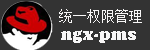
<style>
.page{position:relative;width:150px;height:50px;background:#333333}
.page>*{position:absolute;margin:0}
.t1{font:14px "NSimSun";color:#f7f6f6}
.t2{font:18px "CooperBlack";color:#f7f6f6}
</style>
<div class="page">
<p class="t1" style="left:59px;top:9px;width:83px;height:14px">统一权限管理</p>
<p class="t2" style="left:61px;top:30px;width:75px;height:13px">ngx-pms</p>
</div>
